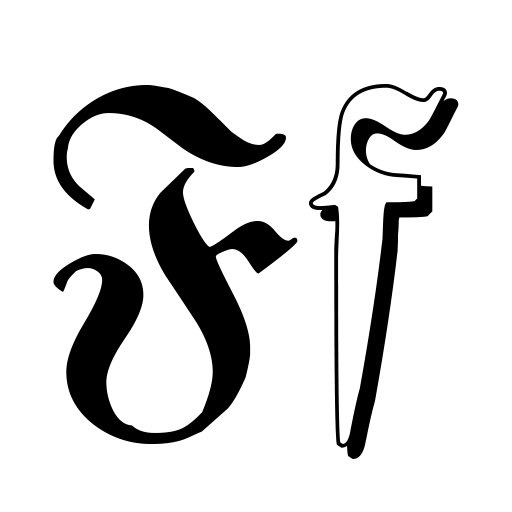
<style>
.page{position:relative;width:512px;height:512px;background:#ffffff}
.page>*{position:absolute;margin:0}
.t1{font:377px "TypographerFraktur-Medium";color:#000000}
.t2{font:377px "TypographerFrakturShadow";color:#000000}
</style>
<div class="page">
<p class="t1" style="left:53px;top:84px;width:406px;height:375px">F<span class="t2">f</span></p>
</div>
